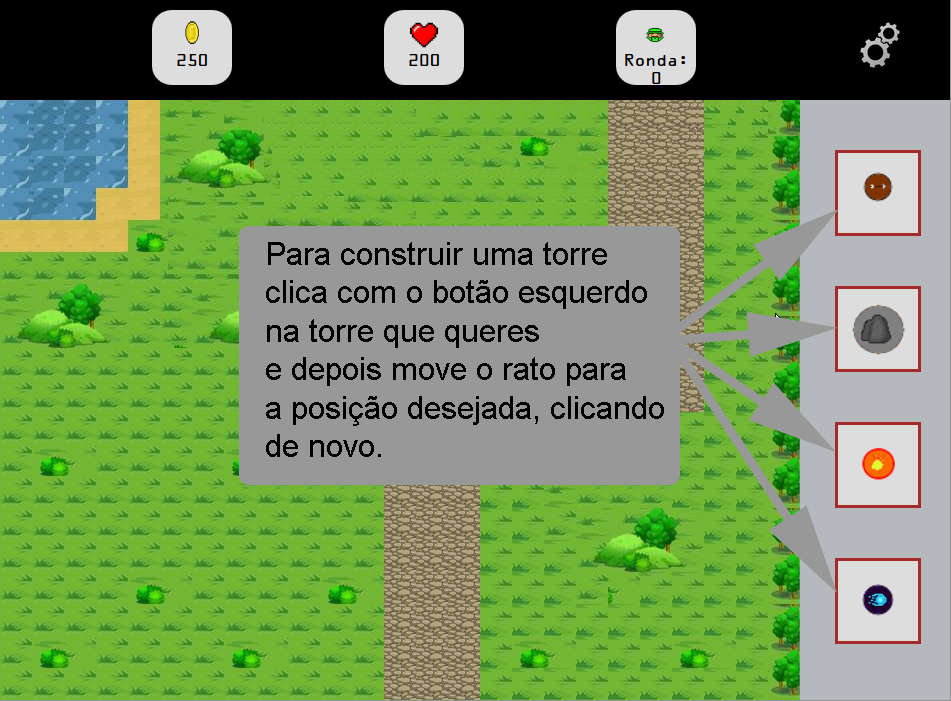
<style>
.page{position:relative;width:951px;height:701px}
.page>*{position:absolute;margin:0}
.t1{font:32px "ArialMT";color:#000000}
</style>
<div class="page">
<p class="t1" style="left:266px;top:242px;width:398px;height:215px">Para construir uma torre<br>clica com o botão esquerdo<br>na torre que queres<br>e depois move o rato para <br>a posição desejada, clicando<br>de novo.</p>
</div>
